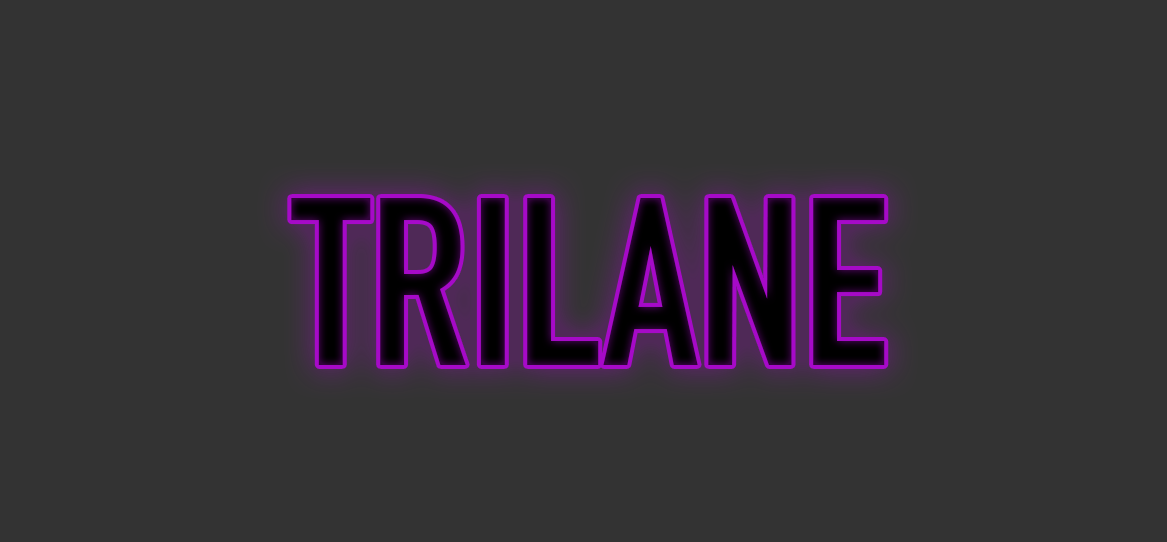
<style>
.page{position:relative;width:1167px;height:542px;background:#333333}
.page>*{position:absolute;margin:0}
.t1{font:233.7px "DINEngschrift";color:#070009}
</style>
<div class="page">
<p class="t1" style="left:291px;top:198px;width:594px;height:167px">TRILANE</p>
</div>
